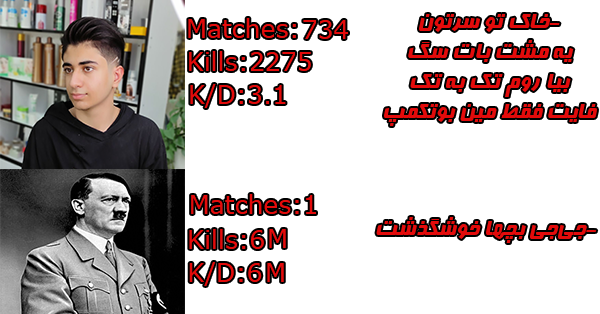
<style>
.page{position:relative;width:600px;height:314px;background:#ffffff}
.page>*{position:absolute;margin:0}
.t1{font:25px "Far.Farnaz";color:#e30b0b}
.t2{font:25px "MSReferenceSansSerif";color:#e30b0b}
</style>
<div class="page">
<p class="t1" style="left:384px;top:14px;width:213px;height:112px;text-align:center">-خاک تو سرتون<br>یه مشت بات سگ<br>بیا روم تک به تک<br>فایت فقط مین بوتکمپ</p>
<p class="t2" style="left:188px;top:18px;width:108px;height:20px">:Matches</p>
<p class="t2" style="left:303px;top:20px;width:45px;height:19px">734</p>
<p class="t2" style="left:189px;top:51px;width:122px;height:20px">2275:Kills</p>
<p class="t2" style="left:190px;top:84px;width:96px;height:24px">3.1:K/D</p>
<p class="t2" style="left:191px;top:194px;width:125px;height:20px">1:Matches</p>
<p class="t1" style="left:376px;top:217px;width:221px;height:26px">-جی‌جی بچها خوشگذشت</p>
<p class="t2" style="left:189px;top:229px;width:75px;height:20px">6:Kills</p>
<p class="t2" style="left:269px;top:229px;width:17px;height:19px">M</p>
<p class="t2" style="left:189px;top:262px;width:73px;height:24px">6:K/D</p>
<p class="t2" style="left:267px;top:263px;width:17px;height:19px">M</p>
</div>
